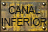
<style>
.page{position:relative;width:48px;height:32px}
.page>*{position:absolute;margin:0}
.t1{font:11px/12px "ArialMT";color:#131312;scale:0.87 1}
</style>
<div class="page">
<p class="t1" style="left:1px;top:6px;width:46px;height:20px;text-align:center">CANAL<br>INFERIOR</p>
</div>
